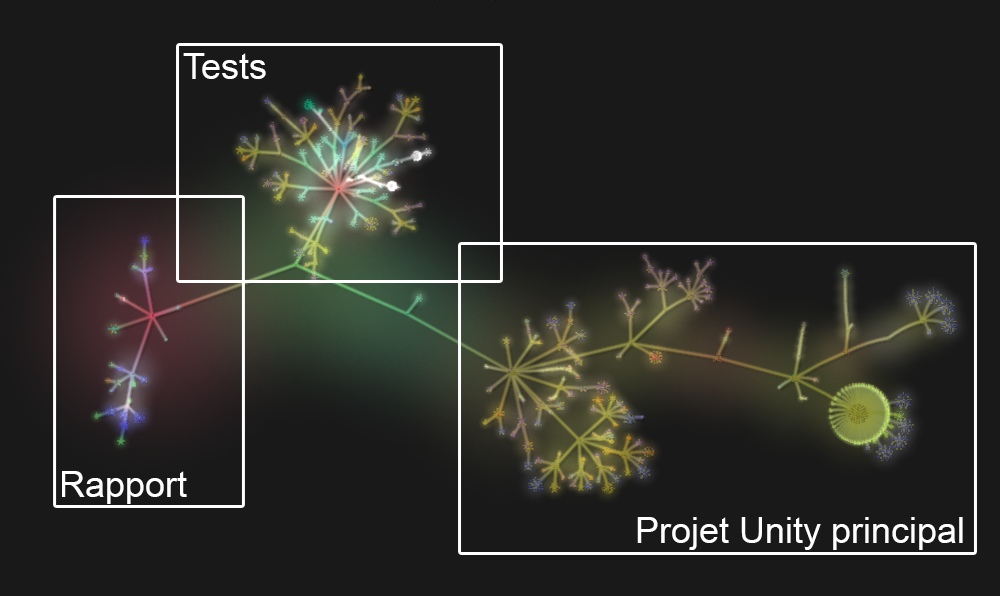
<style>
.page{position:relative;width:1001px;height:596px;background:#191919}
.page>*{position:absolute;margin:0}
.t1{font:36px "ArialMT";color:#ffffff}
</style>
<div class="page">
<p class="t1" style="left:183px;top:53px;width:83px;height:26px">Tests</p>
<p class="t1" style="left:62px;top:471px;width:125px;height:33px">Rapport</p>
<p class="t1" style="left:637px;top:517px;width:326px;height:33px">Projet Unity principal</p>
</div>
